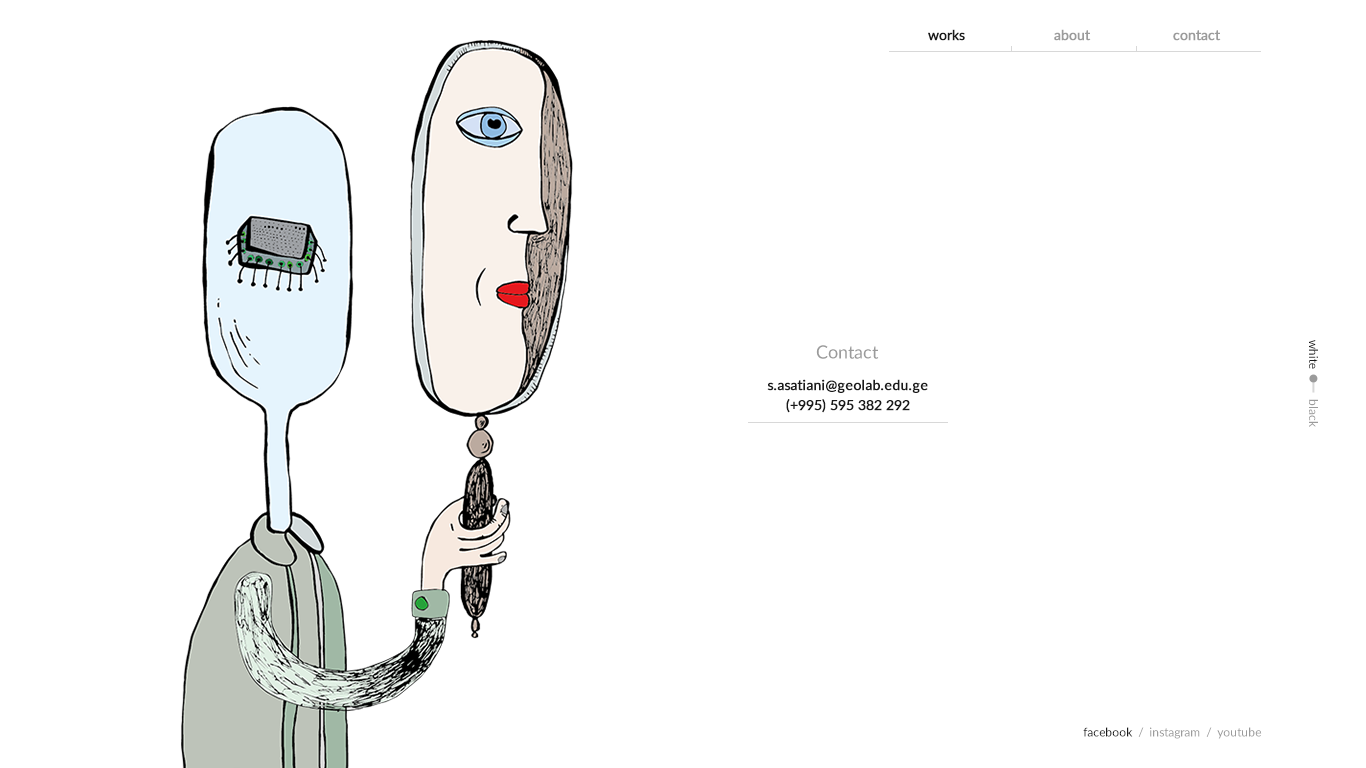
<style>
.page{position:relative;width:1366px;height:768px;background:#ffffff}
.page>*{position:absolute;margin:0}
.t1{font:14px "Lato-Regular";color:#1a1a1a;font-weight:bold}
.t2{font:14px "Lato-Regular";color:#9b9b9b;font-weight:bold}
.t3{font:12px "Lato-Regular";color:#1a1a1a}
.t4{font:12px "Lato-Regular";color:#9b9b9b}
.t5{font:18px "Lato-Regular";color:#9b9b9b}
.t6{font:14px/20px "Lato-Regular";color:#1a1a1a;font-weight:bold}
</style>
<div class="page">
<p class="t1" style="left:928px;top:29px;width:37px;height:12px">works</p>
<p class="t2" style="left:1054px;top:29px;width:37px;height:12px">about</p>
<p class="t2" style="left:1173px;top:30px;width:48px;height:11px">contact</p>
<p class="t3" style="left:1309px;top:340px;width:9px;height:87px;rotate:90deg">white          <span class="t4">black</span></p>
<p class="t5" style="left:816px;top:345px;width:63px;height:14px">Contact</p>
<p class="t6" style="left:767px;top:379px;width:161px;height:34px;text-align:center">s.asatiani@geolab.edu.ge<br>(+995) 595 382 292</p>
<p class="t4" style="left:1083px;top:727px;width:179px;height:12px"><span class="t3">facebook</span>  /  instagram  /  youtube</p>
</div>
